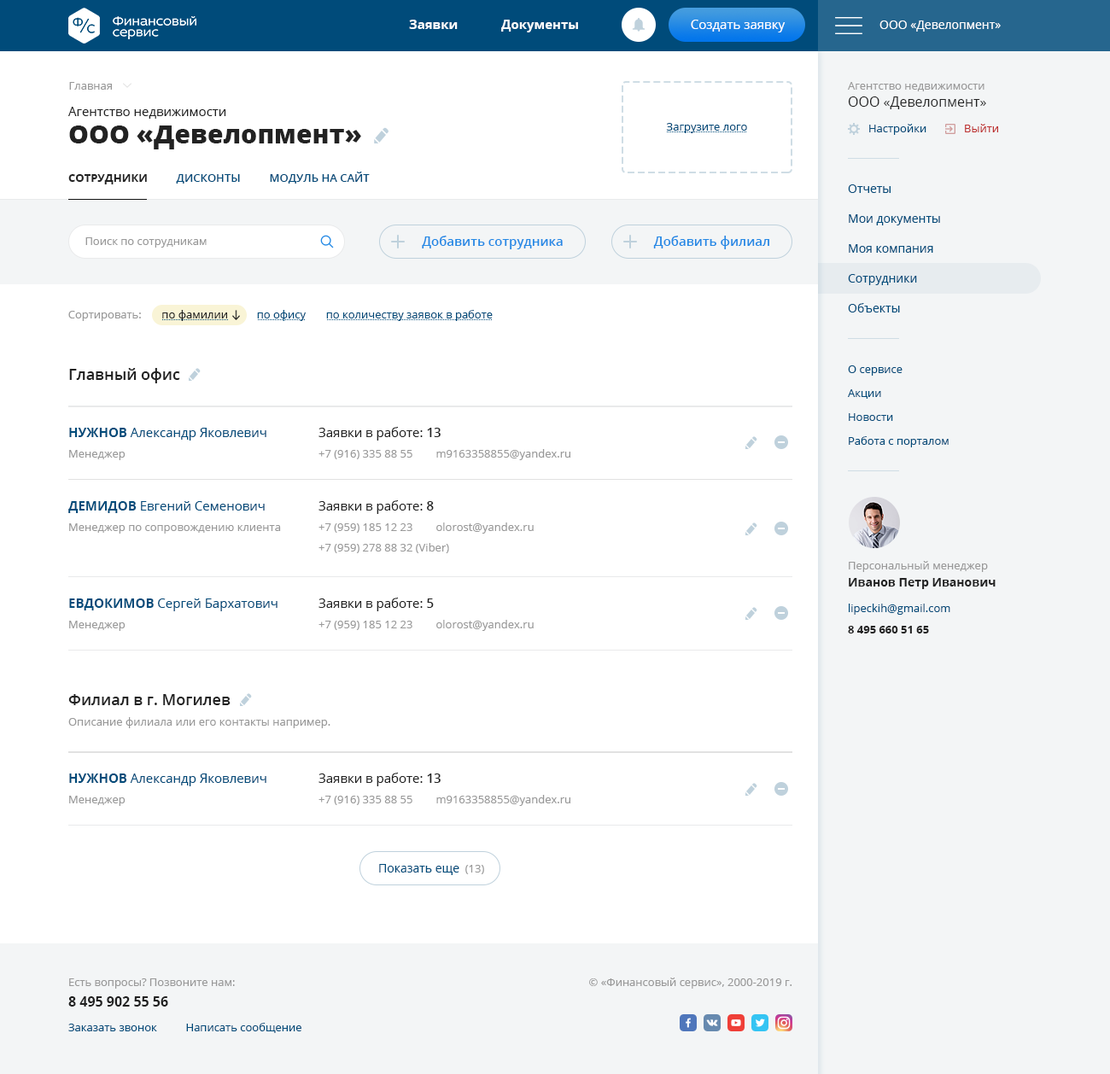
<style>
.page{position:relative;width:1110px;height:1074px;background:#ffffff}
.page>*{position:absolute;margin:0}
.t1{font:12.8px "OpenSans-Bold";color:#ffffff}
.t2{font:12.8px "OpenSans";color:#ffffff}
.t3{font:12px "OpenSans";color:#ffffff}
.t4{font:11.1px "OpenSans";color:#999999}
.t5{font:13.7px/17.1px "OpenSans";color:#222222}
.t6{font:12.8px "OpenSans";color:#222222}
.t7{font:25.6px "OpenSans-Extrabold";color:#222222}
.t8{font:11.1px "OpenSans";color:#004b7a}
.t9{font:11.1px "OpenSans";color:#be3030}
.t10{font:11.1px "OpenSans-Semibold";color:#004b7a;text-transform:uppercase}
.t11{font:11.1px "OpenSans-Bold";color:#222222;text-transform:uppercase}
.t12{font:12px/29.9px "OpenSans";color:#004b7a}
.t13{font:12.8px "OpenSans-Semibold";color:#2389e5}
.t14{font:11.1px "OpenSans";color:#222222}
.t15{font:11.1px/23.9px "OpenSans";color:#004b7a}
.t16{font:15.4px "OpenSans-Semibold";color:#222222}
.t17{font:12.8px "OpenSans";color:#004b7a}
.t18{font:12.8px "OpenSans-Bold";color:#004b7a;text-transform:uppercase}
.t19{font:11.1px/20.5px "OpenSans";color:#999999}
.t20{font:12.8px/17.1px "OpenSans";color:#222222}
.t21{font:12.8px/17.1px "OpenSans-Semibold";color:#222222}
.t22{font:12px/17.1px "OpenSans-Bold";color:#222222}
.t23{font:11.1px "OpenSans-Bold";color:#222222}
.t24{font:12px "OpenSans";color:#004b7a}
.t25{font:13.7px/20.5px "OpenSans-Bold";color:#222222}
</style>
<div class="page">
<p class="t1" style="left:409px;top:20px;width:169px;height:12px">Заявки             Документы</p>
<p class="t2" style="left:691px;top:20px;width:95px;height:12px">Создать заявку</p>
<p class="t3" style="left:880px;top:20px;width:121px;height:12px">ООО «Девелопмент»</p>
<p class="t4" style="left:69px;top:82px;width:43px;height:8px">Главная</p>
<p class="t4" style="left:848px;top:82px;width:138px;height:27px">Агентство недвижимости<br><span class="t5">ООО «Девелопмент»</span></p>
<p class="t6" style="left:68px;top:107px;width:158px;height:12px">Агентство недвижимости</p>
<p class="t7" style="left:69px;top:126px;width:292px;height:23px">ООО «Девелопмент»</p>
<p class="t8" style="left:666px;top:123px;width:81px;height:10px">Загрузите лого</p>
<p class="t8" style="left:869px;top:124px;width:129px;height:11px">Настройки             <span class="t9">Выйти</span></p>
<p class="t10" style="left:68px;top:172px;width:302px;height:12px"><span class="t11">Сотрудники</span>          Дисконты          модуль на сайт</p>
<p class="t12" style="left:848px;top:184px;width:92px;height:129px">Отчеты<br>Мои документы<br>Моя компания<br>Сотрудники<br>Объекты</p>
<p class="t4" style="left:85px;top:237px;width:122px;height:11px">Поиск по сотрудникам</p>
<p class="t13" style="left:422px;top:236px;width:141px;height:13px">Добавить сотрудника</p>
<p class="t13" style="left:653px;top:236px;width:116px;height:13px">Добавить филиал</p>
<p class="t8" style="left:68px;top:310px;width:425px;height:11px"><span class="t4">Сортировать:       </span><span class="t14">по фамилии          </span>по офису       по количеству заявок в работе</p>
<p class="t15" style="left:848px;top:365px;width:101px;height:82px">О сервисе<br>Акции<br>Новости<br>Работа с порталом</p>
<p class="t16" style="left:69px;top:368px;width:111px;height:15px">Главный офис</p>
<p class="t17" style="left:69px;top:428px;width:197px;height:32px"><span class="t18">Нужнов </span>Александр Яковлевич<br><span class="t19">Менеджер</span></p>
<p class="t19" style="left:319px;top:427px;width:251px;height:33px"><span class="t20">Заявки в работе: </span><span class="t21">13<br></span>+7 (916) 335 88 55        m9163358855@yandex.ru</p>
<p class="t19" style="left:68px;top:501px;width:213px;height:33px"><span class="t18">Демидов </span><span class="t17">Евгений Семенович<br></span>Менеджер по сопровождению клиента</p>
<p class="t19" style="left:319px;top:500px;width:215px;height:53px"><span class="t20">Заявки в работе: </span><span class="t21">8<br></span>+7 (959) 185 12 23        olorost@yandex.ru<br>+7 (959) 278 88 32 (Viber)</p>
<p class="t4" style="left:849px;top:561px;width:147px;height:28px">Персональный менеджер<br><span class="t22">Иванов Петр Иванович</span></p>
<p class="t17" style="left:69px;top:599px;width:209px;height:32px"><span class="t18">Евдокимов </span>Сергей Бархатович<br><span class="t19">Менеджер</span></p>
<p class="t19" style="left:319px;top:598px;width:215px;height:33px"><span class="t20">Заявки в работе: </span><span class="t21">5<br></span>+7 (959) 185 12 23        olorost@yandex.ru</p>
<p class="t8" style="left:849px;top:604px;width:101px;height:11px">lipeckih@gmail.com</p>
<p class="t23" style="left:848px;top:626px;width:81px;height:8px">8 495 660 51 65</p>
<p class="t19" style="left:68px;top:694px;width:262px;height:34px"><span class="t16">Филиал в г. Могилев<br></span>Описание филиала или его контакты например.</p>
<p class="t17" style="left:69px;top:774px;width:197px;height:32px"><span class="t18">Нужнов </span>Александр Яковлевич<br><span class="t19">Менеджер</span></p>
<p class="t19" style="left:319px;top:773px;width:251px;height:33px"><span class="t20">Заявки в работе: </span><span class="t21">13<br></span>+7 (916) 335 88 55        m9163358855@yandex.ru</p>
<p class="t24" style="left:379px;top:864px;width:105px;height:11px">Показать еще <span class="t4"> (13)</span></p>
<p class="t4" style="left:589px;top:978px;width:203px;height:11px">© «Финансовый сервис», 2000-2019 г.</p>
<p class="t19" style="left:68px;top:979px;width:167px;height:28px">Есть вопросы? Позвоните нам:<br><span class="t25">8 495 902 55 56</span></p>
<p class="t8" style="left:68px;top:1023px;width:233px;height:10px">Заказать звонок          Написать сообщение</p>
</div>
